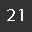
<style>
.page{position:relative;width:32px;height:32px;background:#333333}
.page>*{position:absolute;margin:0}
.t1{font:17.8px "MyriadPro-Regular";color:#ffffff;scale:1.12 1}
</style>
<div class="page">
<p class="t1" style="left:7px;top:9px;width:16px;height:12px">21</p>
</div>
